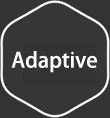
<style>
.page{position:relative;width:110px;height:118px;background:#333333}
.page>*{position:absolute;margin:0}
.t1{font:20.6px "AdobeHeitiStd-Regular";color:#fefefe}
</style>
<div class="page">
<p class="t1" style="left:11px;top:51px;width:86px;height:22px">Adaptive</p>
</div>
